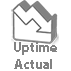
<style>
.page{position:relative;width:71px;height:71px;background:#ffffff}
.page>*{position:absolute;margin:0}
.t1{font:13.8px "MyriadPro-Bold";color:#828282}
</style>
<div class="page">
<p class="t1" style="left:14px;top:42px;width:43px;height:27px;text-align:center">Uptime<br>Actual</p>
</div>
